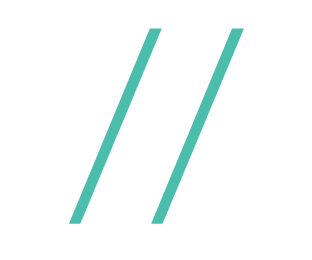
<style>
.page{position:relative;width:312px;height:260px;background:#ffffff}
.page>*{position:absolute;margin:0}
.t1{font:221.3px "MicrosoftJhengHeiUILight";letter-spacing:-0.025em;color:#4abdac}
</style>
<div class="page">
<p class="t1" style="left:69px;top:28px;width:175px;height:196px">//</p>
</div>
